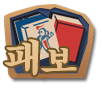
<style>
.page{position:relative;width:102px;height:89px;background:#ffffff}
.page>*{position:absolute;margin:0}
.t1{font:39px "MJemokBatang";letter-spacing:-0.14em;color:#e7c18f;font-weight:bold;scale:1.12 1}
.t2{font:32.9px "MJemokBatang";letter-spacing:-0.14em;color:#e7c18f;font-weight:bold;scale:1.12 1}
</style>
<div class="page">
<p class="t1" style="left:4px;top:39px;width:73px;height:37px">패<span class="t2">보</span></p>
</div>
